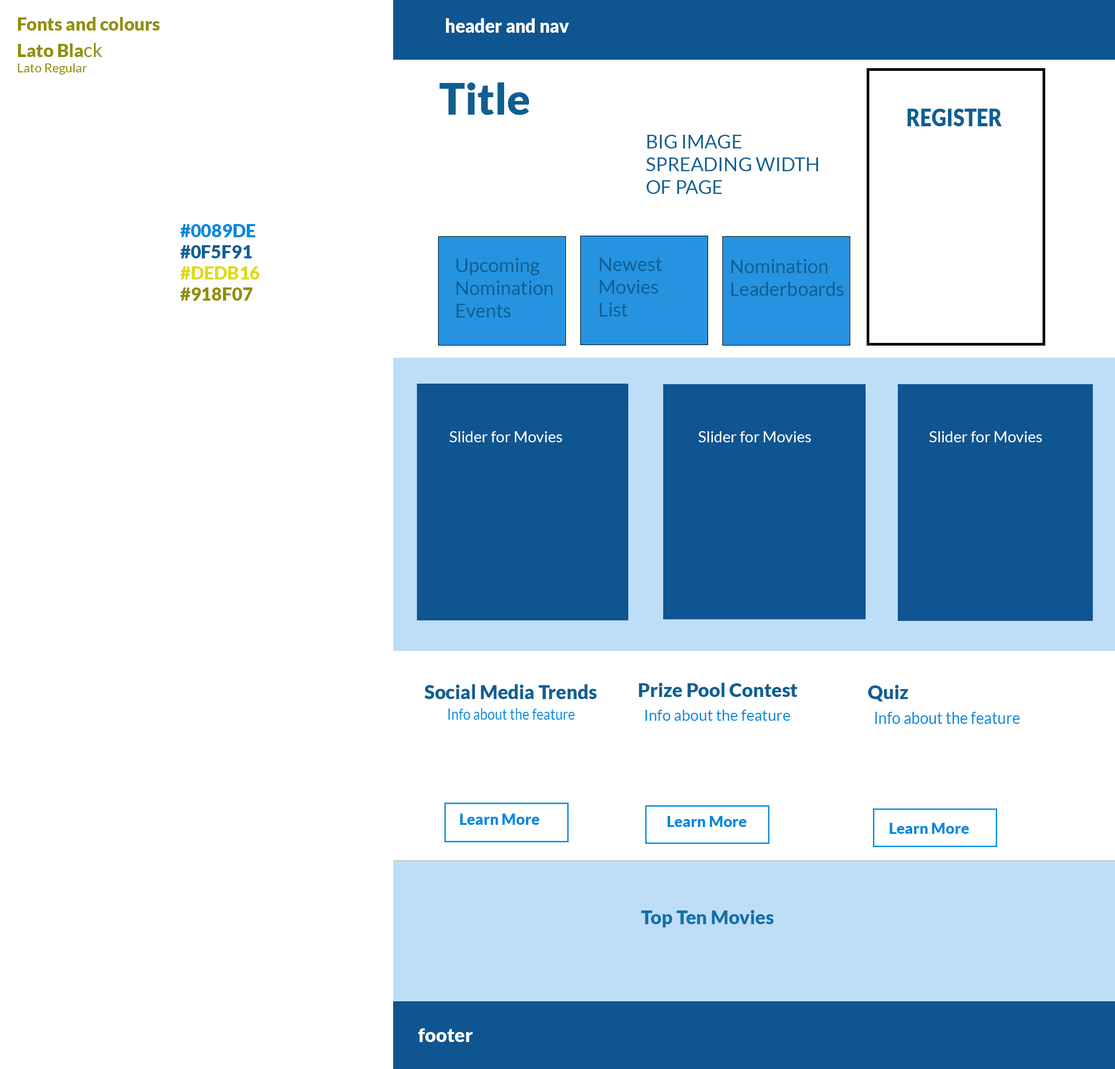
<style>
.page{position:relative;width:1115px;height:1069px;background:#ffffff}
.page>*{position:absolute;margin:0}
.t1{font:18px "Lato-Black";color:#918f07}
.t2{font:19px "Lato-Black";color:#ffffff;scale:0.94 1}
.t3{font:12.7px "Lato-Regular";color:#918f07}
.t4{font:19px "Lato-Regular";color:#918f07}
.t5{font:43.3px "Lato-Black";color:#0f5f91}
.t6{font:24px "Lato-Black";color:#0f5f91;scale:0.86 1}
.t7{font:19px "Lato-Regular";color:#0f5f91}
.t8{font:18px "Lato-Black";color:#0089de}
.t9{font:18px "Lato-Black";color:#0f5f91}
.t10{font:18px "Lato-Black";color:#dedb16}
.t11{font:15.3px "Lato-Regular";color:#ffffff}
.t12{font:19.7px "Lato-Black";color:#0f5f91;scale:0.97 1}
.t13{font:19px "Lato-Black";color:#0f5f91}
.t14{font:15.6px "Lato-Regular";color:#0089de;scale:0.86 1}
.t15{font:15.3px "Lato-Regular";color:#0089de}
.t16{font:17.2px "Lato-Regular";color:#0089de;scale:0.89 1}
.t17{font:15.9px "Lato-Black";color:#0089de;scale:0.97 1}
.t18{font:15.3px "Lato-Black";color:#0089de}
.t19{font:19px "Lato-Black";color:#ffffff}
</style>
<div class="page">
<p class="t1" style="left:18px;top:17px;width:142px;height:14px">Fonts and colours</p>
<p class="t2" style="left:446px;top:18px;width:123px;height:15px">header and nav</p>
<p class="t3" style="left:18px;top:43px;width:85px;height:32px"><span class="t1">Lato Bla</span><span class="t4">ck<br></span>Lato Regular</p>
<p class="t5" style="left:439px;top:82px;width:91px;height:33px">Title</p>
<p class="t6" style="left:908px;top:108px;width:94px;height:18px">REGISTER</p>
<p class="t7" style="left:646px;top:135px;width:172px;height:59px">BIG IMAGE SPREADING WIDTH OF PAGE</p>
<p class="t8" style="left:180px;top:224px;width:75px;height:13px">#0089DE</p>
<p class="t9" style="left:180px;top:245px;width:72px;height:13px">#0F5F91</p>
<p class="t7" style="left:456px;top:258px;width:97px;height:60px">Upcoming <br>Nomination<br>Events</p>
<p class="t7" style="left:600px;top:257px;width:62px;height:60px">Newest<br>Movies<br>List</p>
<p class="t10" style="left:180px;top:266px;width:80px;height:14px">#DEDB16</p>
<p class="t7" style="left:731px;top:259px;width:113px;height:37px">Nomination<br>Leaderboards</p>
<p class="t1" style="left:180px;top:288px;width:73px;height:13px">#918F07</p>
<p class="t11" style="left:450px;top:431px;width:112px;height:11px">Slider for Movies</p>
<p class="t11" style="left:699px;top:431px;width:112px;height:11px">Slider for Movies</p>
<p class="t11" style="left:930px;top:431px;width:112px;height:11px">Slider for Movies</p>
<p class="t12" style="left:424px;top:684px;width:173px;height:15px">Social Media Trends</p>
<p class="t13" style="left:639px;top:683px;width:159px;height:14px">Prize Pool Contest</p>
<p class="t13" style="left:868px;top:685px;width:41px;height:17px">Quiz</p>
<p class="t14" style="left:448px;top:708px;width:127px;height:12px">Info about the feature</p>
<p class="t15" style="left:645px;top:710px;width:145px;height:11px">Info about the feature</p>
<p class="t16" style="left:875px;top:712px;width:145px;height:12px">Info about the feature</p>
<p class="t17" style="left:460px;top:813px;width:80px;height:12px">Learn More</p>
<p class="t18" style="left:668px;top:816px;width:79px;height:11px">Learn More</p>
<p class="t18" style="left:890px;top:823px;width:79px;height:11px">Learn More</p>
<p class="t13" style="left:641px;top:910px;width:133px;height:18px">Top Ten Movies</p>
<p class="t19" style="left:418px;top:1029px;width:55px;height:13px">footer</p>
</div>
